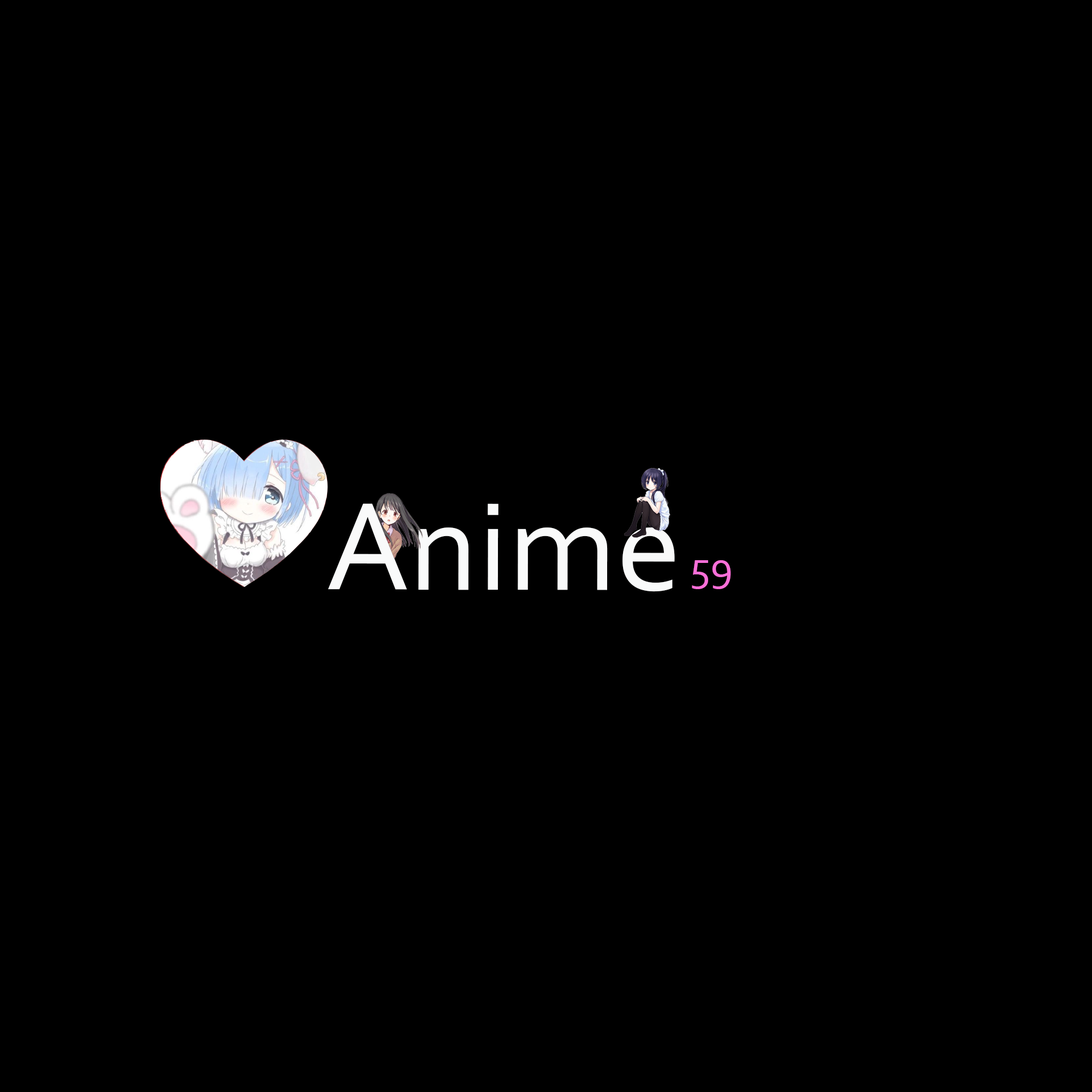
<style>
.page{position:relative;width:1092px;height:1092px;background:#000000}
.page>*{position:absolute;margin:0}
.t1{font:130.7px "Corbel";color:#f9fafa}
.t2{font:43.2px "Corbel";color:#fa6fd8}
</style>
<div class="page">
<p class="t1" style="left:328px;top:503px;width:347px;height:89px">Anime</p>
<p class="t2" style="left:692px;top:560px;width:39px;height:29px">59</p>
</div>
